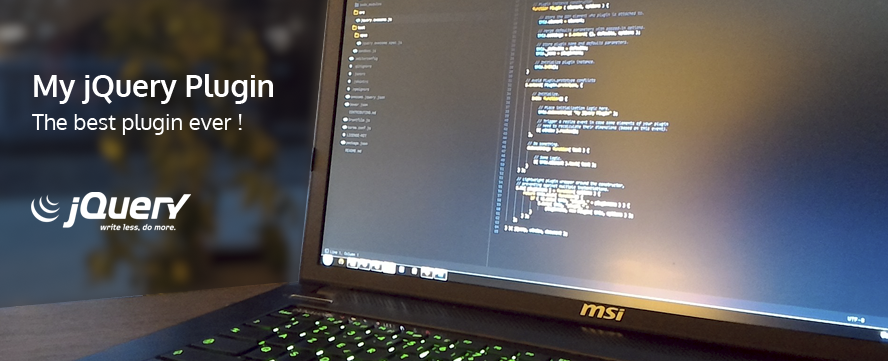
<style>
.page{position:relative;width:888px;height:361px}
.page>*{position:absolute;margin:0}
.t1{font:22px/33px "Oxygen-Regular";color:#ffffff}
.t2{font:30px "Oxygen-Bold";color:#ffffff}
</style>
<div class="page">
<p class="t1" style="left:32px;top:74px;width:241px;height:61px"><span class="t2">My jQuery Plugin<br></span>The best plugin ever !</p>
</div>
